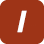
<style>
.page{position:relative;width:44px;height:44px;background:#9e3417}
.page>*{position:absolute;margin:0}
.t1{font:29.9px "OpenSans-BoldItalic";letter-spacing:-0.02em;color:#ffffff}
</style>
<div class="page">
<p class="t1" style="left:17px;top:10px;width:10px;height:23px">I</p>
</div>
